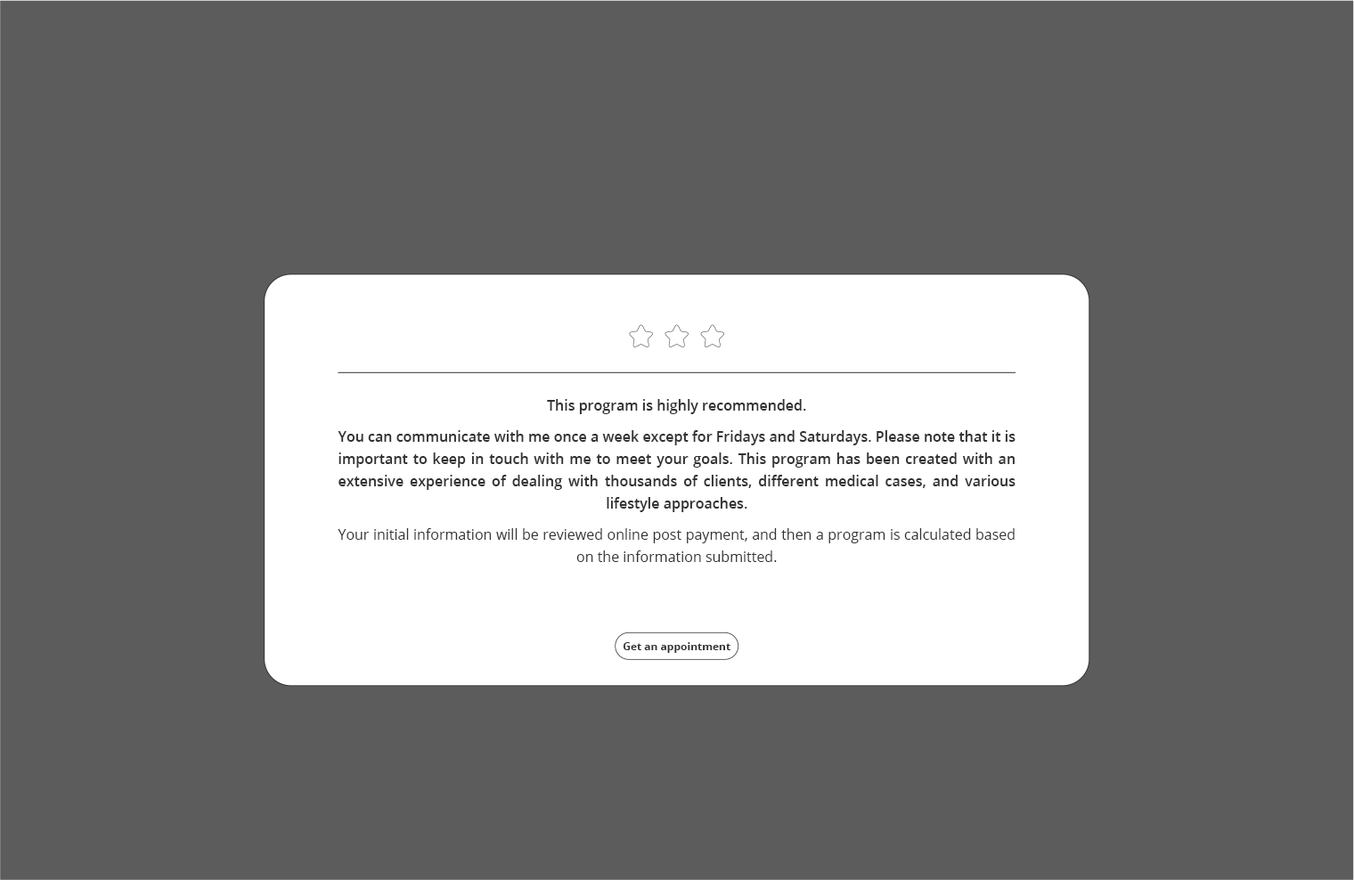
<style>
.page{position:relative;width:1354px;height:880px;background:#5c5c5c}
.page>*{position:absolute;margin:0}
.t1{font:14.3px/22.3px "OpenSans-Semibold";color:#333333}
.t2{font:14.3px/31.2px "OpenSans-Semibold";color:#333333}
.t3{font:14.3px/31.2px "OpenSans";color:#333333}
.t4{font:14.3px/22.3px "OpenSans";color:#333333}
.t5{font:10.7px "OpenSans-Bold";color:#333333}
</style>
<div class="page">
<p class="t1" style="left:338px;top:399px;width:678px;height:163px;text-align:justify"><span class="t2">This program is highly recommended.<br>You can communicate with me once a week except for Fridays and Saturdays. Please note that it is </span>important to keep in touch with me to meet your goals. This program has been created with an extensive experience of dealing with thousands of clients, different medical cases, and various lifestyle approaches.<br><span class="t3">Your initial information will be reviewed online post payment, and then a program is calculated based </span><span class="t4">on the information submitted.</span></p>
<p class="t5" style="left:623px;top:642px;width:108px;height:11px">Get an appointment</p>
</div>
